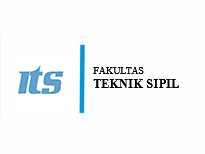
<style>
.page{position:relative;width:205px;height:154px;background:#fefefe}
.page>*{position:absolute;margin:0}
.t1{font:12px/14px "TimesNewRomanPS-BoldMT";letter-spacing:0.025em;color:#010101}
.t2{font:10px/14px "TimesNewRomanPSMT";letter-spacing:0.025em;color:#010101}
</style>
<div class="page">
<p class="t1" style="left:93px;top:67px;width:86px;height:21px"><span class="t2">FAKULTAS<br></span>TEKNIK SIPIL</p>
</div>
